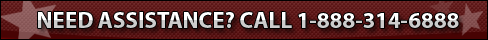
<style>
.page{position:relative;width:488px;height:40px}
.page>*{position:absolute;margin:0}
.t1{font:23px "Myriad-Bold"}
</style>
<div class="page">
<p class="t1" style="left:38px;top:12px;width:421px;height:16px">NEED ASSISTANCE? CALL 1-888-314-6888</p>
</div>
